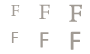
<style>
.page{position:relative;width:90px;height:54px;background:#ffffff}
.page>*{position:absolute;margin:0}
.t1{font:18px "ArnoPro-Regular12pt";color:#a19b94}
.t2{font:23px "ArnoPro-Regular12pt";color:#a19b94}
.t3{font:27px "ArnoPro-Regular12pt";color:#a19b94}
.t4{font:18px "Calibri";color:#a19b94}
.t5{font:24px "Calibri";color:#a19b94}
.t6{font:28px "Calibri";color:#a19b94}
</style>
<div class="page">
<p class="t1" style="left:11px;top:5px;width:9px;height:11px">F</p>
<p class="t2" style="left:39px;top:4px;width:11px;height:15px">F</p>
<p class="t3" style="left:69px;top:4px;width:13px;height:18px">F</p>
<p class="t4" style="left:11px;top:32px;width:8px;height:11px">F</p>
<p class="t5" style="left:40px;top:32px;width:9px;height:16px">F</p>
<p class="t6" style="left:70px;top:31px;width:11px;height:19px">F</p>
</div>
